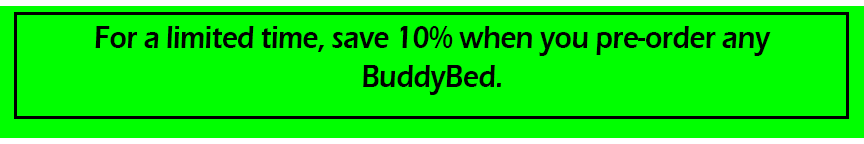
<style>
.page{position:relative;width:864px;height:144px;background:#00ff00}
.page>*{position:absolute;margin:0}
.t1{font:33px "ErasITC-Demi";letter-spacing:-0.01em;color:#000000;scale:0.84 1}
</style>
<div class="page">
<p class="t1" style="left:95px;top:26px;width:676px;height:69px;text-align:center">For a limited time, save 10% when you pre-order any           BuddyBed.</p>
</div>
